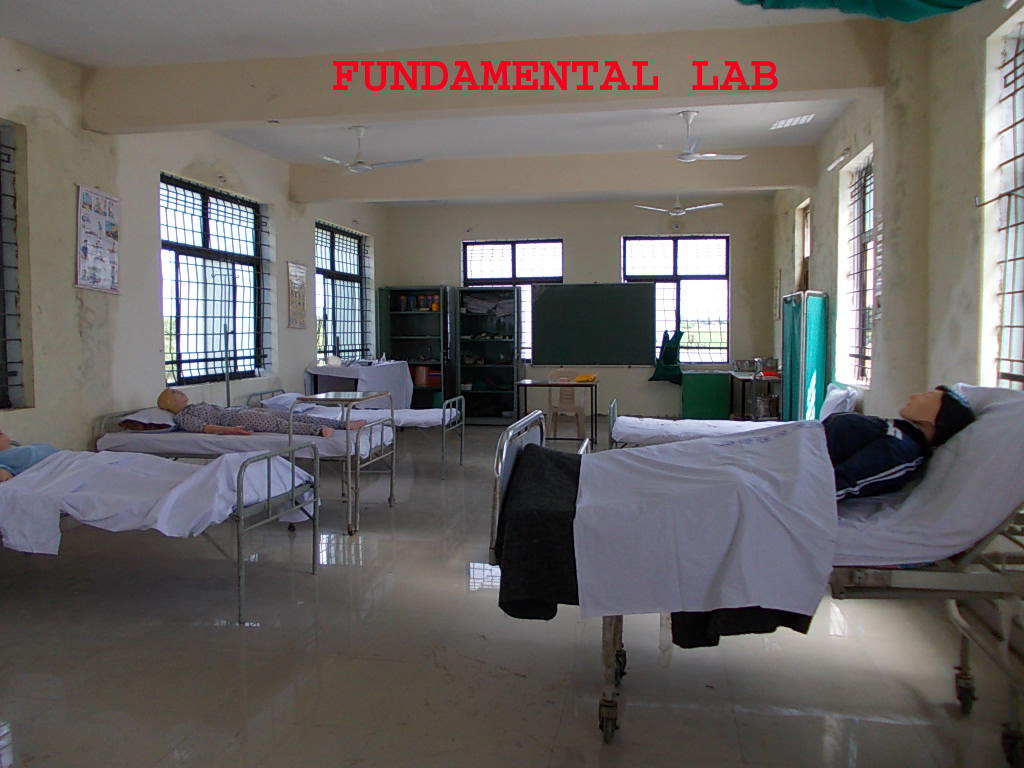
<style>
.page{position:relative;width:1024px;height:768px}
.page>*{position:absolute;margin:0}
.t1{font:50px "Courier-Bold";color:#f5011e}
</style>
<div class="page">
<p class="t1" style="left:333px;top:61px;width:445px;height:30px">FUNDAMENTAL LAB</p>
</div>
